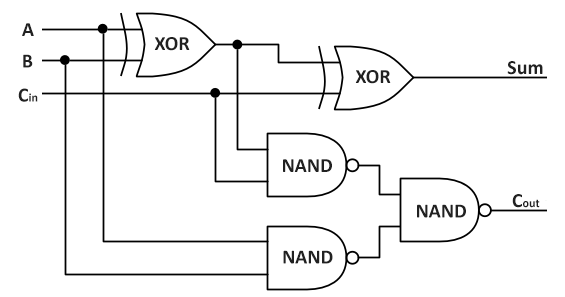
<style>
.page{position:relative;width:565px;height:297px;background:#ffffff}
.page>*{position:absolute;margin:0}
.t1{font:20px "Calibri-Bold";color:#212121}
.t2{font:12px "Calibri-Bold";color:#212121}
</style>
<div class="page">
<p class="t1" style="left:22px;top:23px;width:12px;height:13px">A</p>
<p class="t1" style="left:154px;top:37px;width:36px;height:14px">XOR</p>
<p class="t1" style="left:23px;top:54px;width:10px;height:14px">B</p>
<p class="t1" style="left:507px;top:61px;width:36px;height:14px">Sum</p>
<p class="t1" style="left:355px;top:70px;width:36px;height:14px">XOR</p>
<p class="t2" style="left:18px;top:88px;width:20px;height:14px"><span class="t1">C</span>in</p>
<p class="t1" style="left:283px;top:159px;width:49px;height:13px">NAND</p>
<p class="t2" style="left:512px;top:194px;width:28px;height:14px"><span class="t1">C</span>out</p>
<p class="t1" style="left:417px;top:204px;width:49px;height:14px">NAND</p>
<p class="t1" style="left:283px;top:250px;width:50px;height:14px">NAND</p>
</div>
